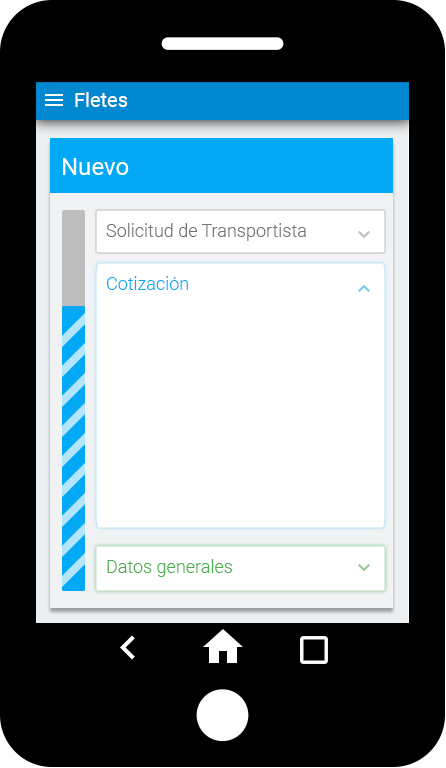
<style>
.page{position:relative;width:446px;height:768px;background:#000000}
.page>*{position:absolute;margin:0}
.t1{font:20px "Roboto-Regular";color:#ffffff}
.t2{font:24px "Roboto-Regular";color:#ffffff}
.t3{font:18px "Roboto-Light";color:#757575}
.t4{font:18px "Roboto-Light";color:#03a9f4}
.t5{font:18px "Roboto-Light";color:#4caf50}
</style>
<div class="page">
<p class="t1" style="left:75px;top:92px;width:53px;height:15px">Fletes</p>
<p class="t2" style="left:63px;top:158px;width:66px;height:17px">Nuevo</p>
<p class="t3" style="left:106px;top:223px;width:200px;height:18px">Solicitud de Transportista</p>
<p class="t4" style="left:107px;top:276px;width:81px;height:14px">Cotización</p>
<p class="t5" style="left:107px;top:559px;width:125px;height:18px">Datos generales</p>
</div>
